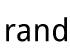
<style>
.page{position:relative;width:70px;height:55px;background:#ffffff}
.page>*{position:absolute;margin:0}
.t1{font:31.8px "DroidSans";color:#000000}
</style>
<div class="page">
<p class="t1" style="left:6px;top:17px;width:61px;height:25px">rand</p>
</div>
